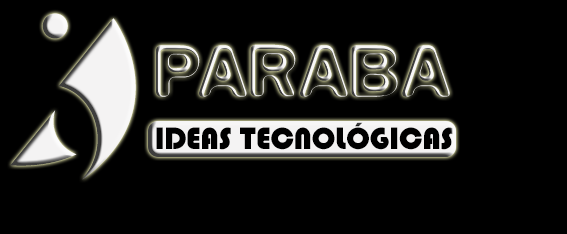
<style>
.page{position:relative;width:567px;height:234px;background:#000000}
.page>*{position:absolute;margin:0}
.t1{font:86.4px "ImpressedMetal"}
.t2{font:30px "Hippo-";color:#010101}
</style>
<div class="page">
<p class="t1" style="left:156px;top:44px;width:294px;height:53px">PARABA</p>
<p class="t2" style="left:156px;top:122px;width:297px;height:28px">IDEAS TECNOLÓGICAS</p>
</div>
